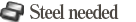
<style>
.page{position:relative;width:136px;height:22px;background:#ffffff}
.page>*{position:absolute;margin:0}
.t1{font:20px "RyuminPro-ExBold";letter-spacing:-0.08em;color:#4d4843;scale:0.9 1}
</style>
<div class="page">
<p class="t1" style="left:30px;top:4px;width:89px;height:15px">Steel needed</p>
</div>
